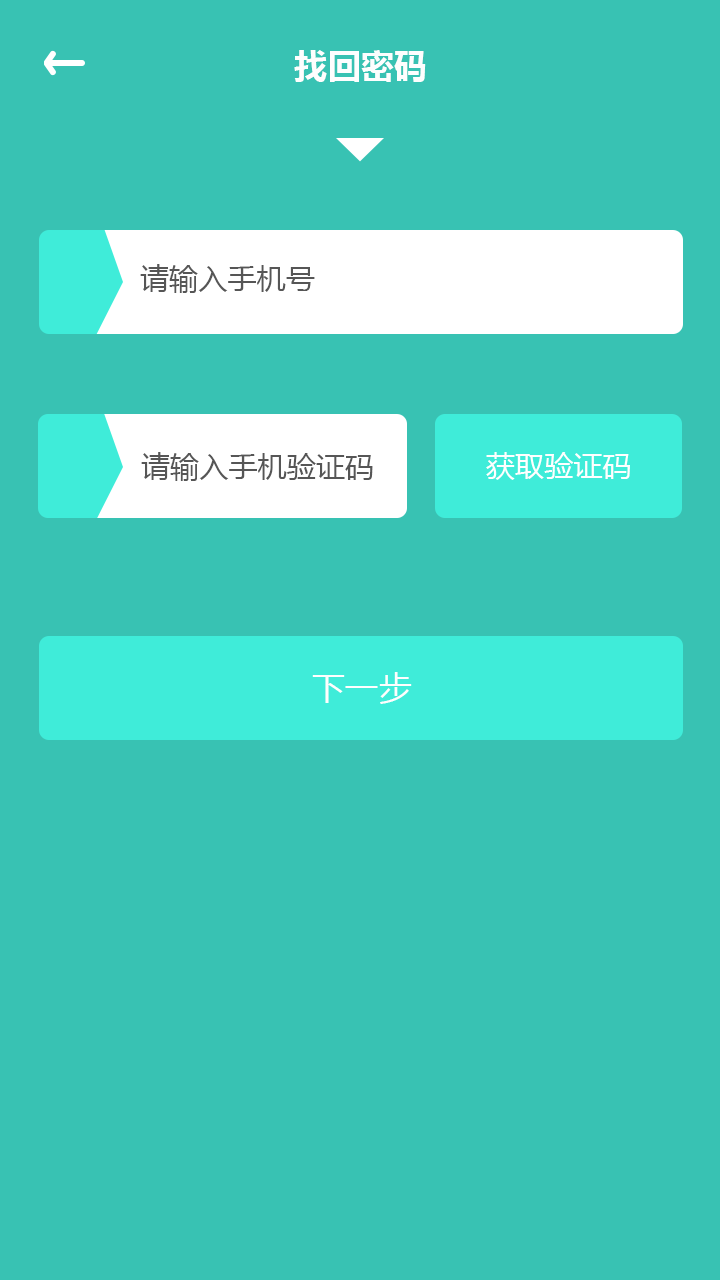
<style>
.page{position:relative;width:720px;height:1280px;background:#38c2b3}
.page>*{position:absolute;margin:0}
.t1{font:33.3px "MicrosoftYaHei-Bold";color:#fefefe}
.t2{font:29.2px "MicrosoftYaHei";color:#565656}
.t3{font:29.2px "MicrosoftYaHei";color:#ffffff}
.t4{font:33.3px "MicrosoftYaHei";color:#fefefe}
</style>
<div class="page">
<p class="t1" style="left:294px;top:50px;width:132px;height:32px">找回密码</p>
<p class="t2" style="left:140px;top:264px;width:175px;height:29px">请输入手机号</p>
<p class="t2" style="left:141px;top:452px;width:232px;height:29px">请输入手机验证码</p>
<p class="t3" style="left:486px;top:452px;width:144px;height:28px">获取验证码</p>
<p class="t4" style="left:312px;top:672px;width:100px;height:32px">下一步</p>
</div>
